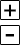
<style>
.page{position:relative;width:20px;height:45px;background:#ffffff}
.page>*{position:absolute;margin:0}
.t1{font:24px "ArialMT";letter-spacing:0.01em;color:#000000}
.t2{font:30px "ArialMT";letter-spacing:0.01em;color:#000000}
</style>
<div class="page">
<p class="t1" style="left:4px;top:4px;width:12px;height:13px">+</p>
<p class="t2" style="left:5px;top:34px;width:9px;height:3px">-</p>
</div>
